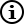
<style>
.page{position:relative;width:24px;height:24px;background:#ffffff}
.page>*{position:absolute;margin:0}
.t1{font:20.8px "BellMTBold";color:#000000;scale:1.4 1}
</style>
<div class="page">
<p class="t1" style="left:8px;top:5px;width:9px;height:14px">i</p>
</div>
